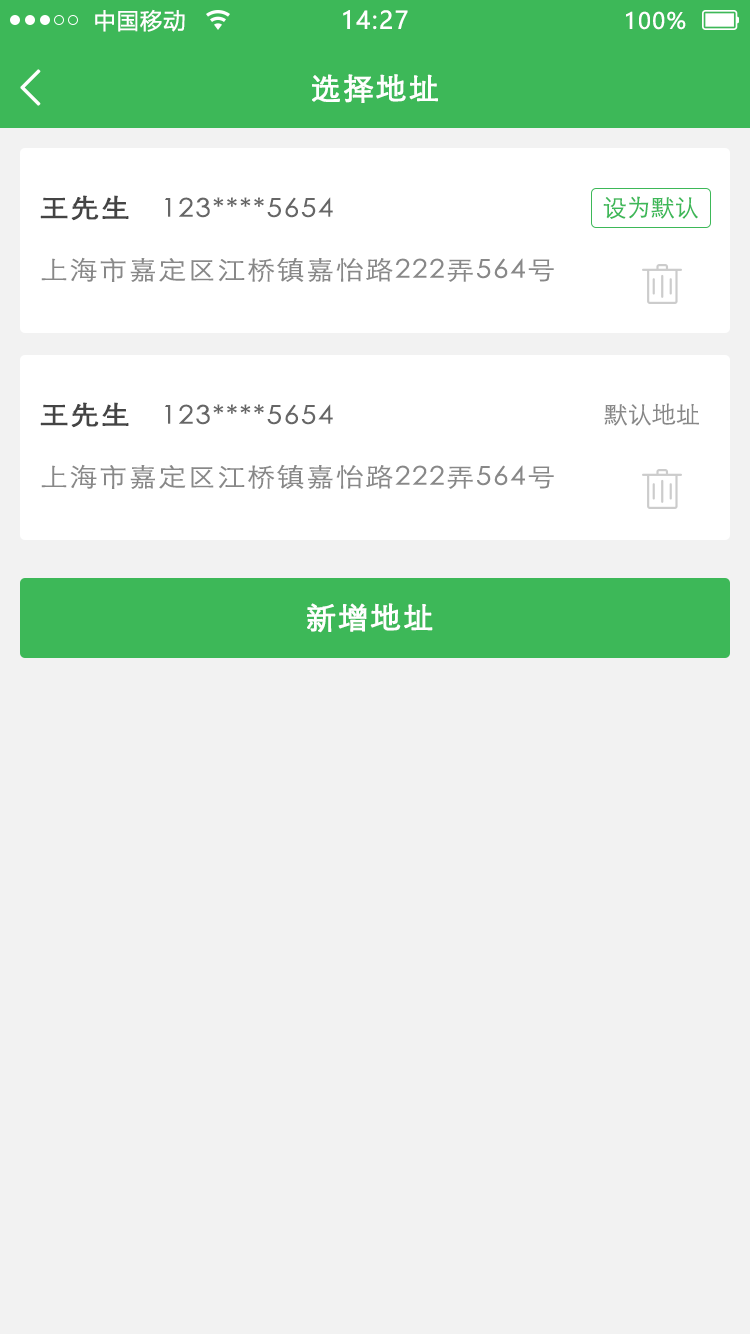
<style>
.page{position:relative;width:750px;height:1334px;background:#f2f2f2}
.page>*{position:absolute;margin:0}
.t1{font:22px "MicrosoftYaHei";letter-spacing:0.06em;color:#ffffff}
.t2{font:24px "MicrosoftYaHei";letter-spacing:0.06em;color:#ffffff}
.t3{font:49.8px "NSimSun";letter-spacing:0.06em;color:#fefffe;font-weight:bold}
.t4{font:30px "STXihei";letter-spacing:0.06em;color:#fefffe;font-weight:bold}
.t5{font:25.9px "STXihei";letter-spacing:0.06em;color:#444444;font-weight:bold;scale:1.09 1}
.t6{font:25.7px "STXihei";letter-spacing:0.06em;color:#666666;scale:1.09 1}
.t7{font:24px "STXihei";color:#3db858}
.t8{font:25.7px "STXihei";letter-spacing:0.06em;color:#888888;scale:1.09 1}
.t9{font:24px "STXihei";color:#888888}
.t10{font:29.9px "STXihei";letter-spacing:0.06em;color:#ffffff;font-weight:bold}
</style>
<div class="page">
<p class="t1" style="left:95px;top:9px;width:90px;height:23px">中国移动</p>
<p class="t2" style="left:343px;top:10px;width:65px;height:20px">14:27</p>
<p class="t1" style="left:626px;top:11px;width:60px;height:19px">100%</p>
<p class="t3" style="left:20px;top:69px;width:21px;height:37px">&lt;</p>
<p class="t4" style="left:312px;top:74px;width:126px;height:29px">选择地址</p>
<p class="t5" style="left:40px;top:195px;width:89px;height:26px">王先生</p>
<p class="t6" style="left:165px;top:197px;width:168px;height:21px">123****5654</p>
<p class="t7" style="left:603px;top:196px;width:95px;height:23px">设为默认</p>
<p class="t8" style="left:41px;top:257px;width:513px;height:25px">上海市嘉定区江桥镇嘉怡路222弄564号</p>
<p class="t5" style="left:40px;top:402px;width:89px;height:26px">王先生</p>
<p class="t6" style="left:165px;top:404px;width:168px;height:21px">123****5654</p>
<p class="t9" style="left:604px;top:403px;width:95px;height:23px">默认地址</p>
<p class="t8" style="left:41px;top:464px;width:513px;height:25px">上海市嘉定区江桥镇嘉怡路222弄564号</p>
<p class="t10" style="left:307px;top:603px;width:126px;height:30px">新增地址</p>
</div>
